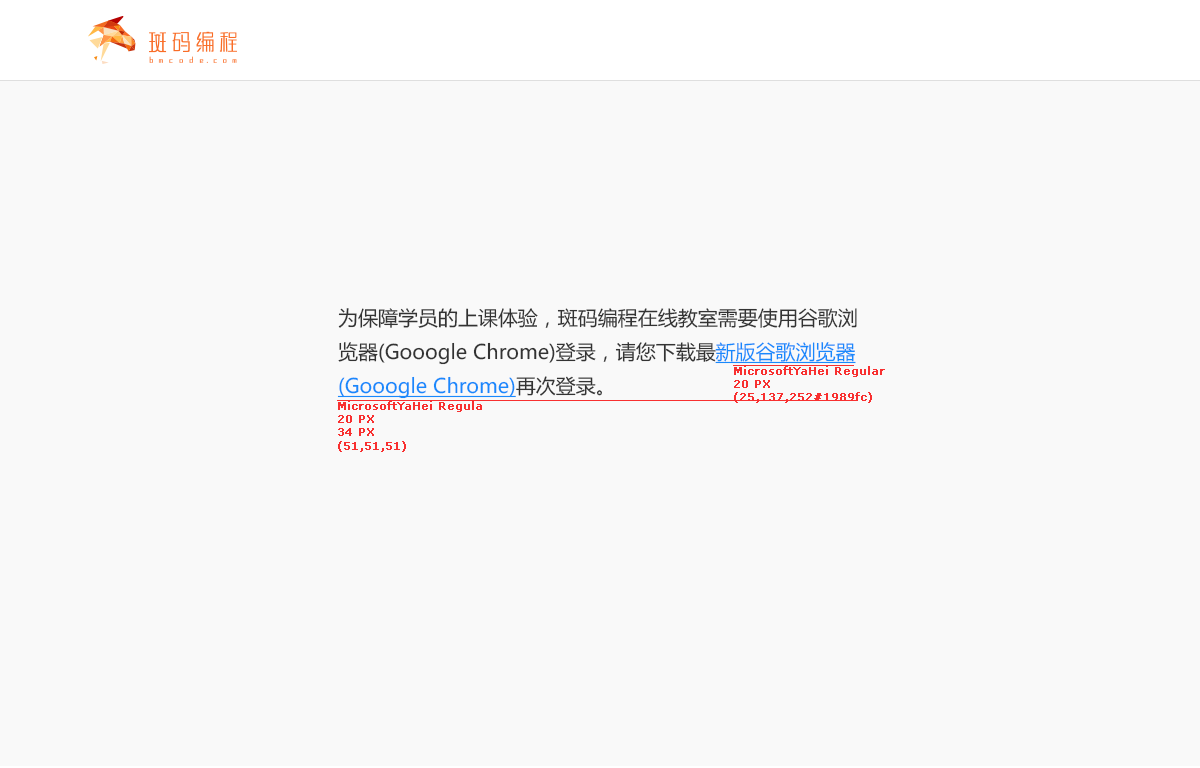
<style>
.page{position:relative;width:1200px;height:768px;background:#f9f9f9}
.page>*{position:absolute;margin:0}
.t1{font:20px/34px "MicrosoftYaHei";color:#333333}
.t2{font:20px/34px "MicrosoftYaHei";color:#1989fc;text-decoration:underline}
.t3{font:11px "Verdana";color:#f83030;font-weight:bold}
</style>
<div class="page">
<p class="t1" style="left:337px;top:308px;width:520px;height:91px">为保障学员的上课体验，斑码编程在线教室需要使用谷歌浏览器(Gooogle Chrome)登录，请您下载最<span class="t2">新版谷歌浏览器(Gooogle Chrome)</span>再次登录。</p>
<p class="t3" style="left:734px;top:366px;width:151px;height:37px">MicrosoftYaHei Regular<br>20 PX<br>(25,137,252#1989fc)</p>
<p class="t3" style="left:338px;top:401px;width:144px;height:51px">MicrosoftYaHei Regula<br>20 PX<br>34 PX<br>(51,51,51)</p>
</div>
